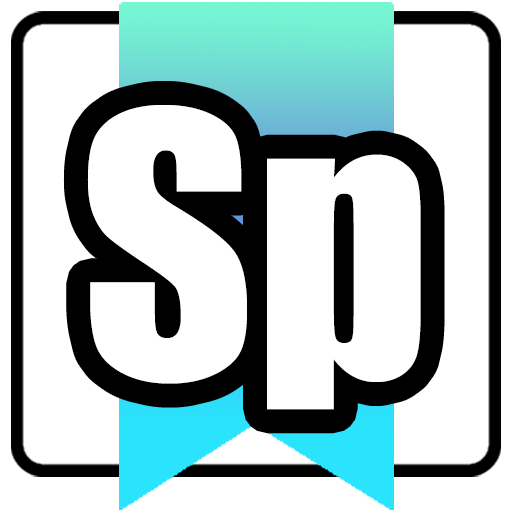
<style>
.page{position:relative;width:512px;height:512px;background:#ffffff}
.page>*{position:absolute;margin:0}
.t1{font:338.3px "Impact";color:#ffffff}
</style>
<div class="page">
<p class="t1" style="left:87px;top:105px;width:334px;height:305px">Sp</p>
</div>
